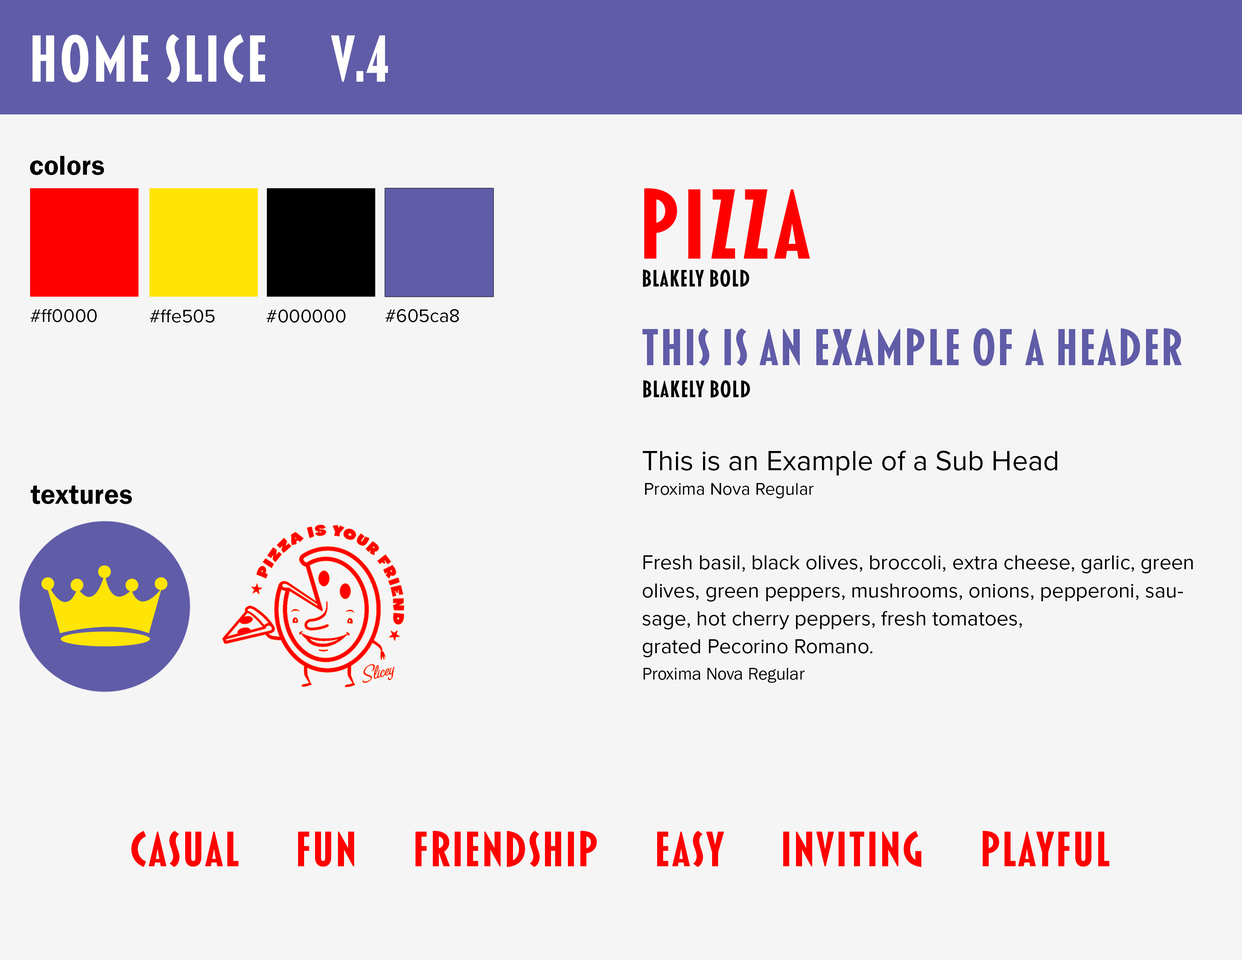
<style>
.page{position:relative;width:1242px;height:960px;background:#f6f5f5}
.page>*{position:absolute;margin:0}
.t1{font:67.7px "Blakely-Bold";color:#fffffd}
.t2{font:28.2px "FranklinGothicURW-Dem";color:#000000}
.t3{font:101.3px "Blakely-Bold";color:#ff0000}
.t4{font:24.5px "Blakely-Bold";color:#050505}
.t5{font:18.8px "ProximaNova-Regular";color:#030303}
.t6{font:18.8px "ProximaNova-Regular";color:#020202}
.t7{font:18.8px "ProximaNova-Regular";color:#010101}
.t8{font:18.8px "ProximaNova-Regular";color:#000000}
.t9{font:52.9px "Blakely-Bold";color:#605ca8}
.t10{font:24.5px "Blakely-Bold";color:#020202}
.t11{font:28.6px "ProximaNova-Regular";color:#000000}
.t12{font:28.2px "FranklinGothicURW-Dem";color:#010101}
.t13{font:17.7px "ProximaNova-Regular";color:#020202}
.t14{font:20.9px/28px "ProximaNova-Regular";color:#020202}
.t15{font:17.7px "FranklinGothicURW-Boo";color:#040404}
.t16{font:50.5px "Blakely-Bold";color:#ff0000}
</style>
<div class="page">
<p class="t1" style="left:32px;top:34px;width:356px;height:49px">Home Slice     v.4</p>
<p class="t2" style="left:30px;top:156px;width:74px;height:19px">colors</p>
<p class="t3" style="left:644px;top:188px;width:166px;height:71px">PIZZA</p>
<p class="t4" style="left:643px;top:270px;width:106px;height:17px">Blakely Bold</p>
<p class="t5" style="left:30px;top:309px;width:67px;height:13px">#ff0000</p>
<p class="t6" style="left:150px;top:309px;width:65px;height:14px">#ffe505</p>
<p class="t7" style="left:267px;top:309px;width:79px;height:14px">#000000</p>
<p class="t8" style="left:385px;top:309px;width:74px;height:13px">#605ca8</p>
<p class="t9" style="left:643px;top:328px;width:539px;height:38px">THIS IS AN EXAMPLE OF A HEADER</p>
<p class="t10" style="left:643px;top:380px;width:107px;height:18px">Blakely Bold</p>
<p class="t11" style="left:643px;top:451px;width:414px;height:24px">This is an Example of a Sub Head</p>
<p class="t12" style="left:30px;top:485px;width:102px;height:19px">textures</p>
<p class="t13" style="left:645px;top:483px;width:169px;height:15px">Proxima Nova Regular</p>
<p class="t14" style="left:643px;top:555px;width:550px;height:102px">Fresh basil, black olives, broccoli, extra cheese, garlic, green olives, green peppers, mushrooms, onions, pepperoni, sausage, hot cherry peppers, fresh tomatoes,<br>grated Pecorino Romano.</p>
<p class="t15" style="left:644px;top:668px;width:161px;height:15px">Proxima Nova Regular</p>
<p class="t16" style="left:131px;top:831px;width:979px;height:36px">CASUAL      FUN      FRIENDSHIP      EASY      INVITING      PLAYFUL</p>
</div>
